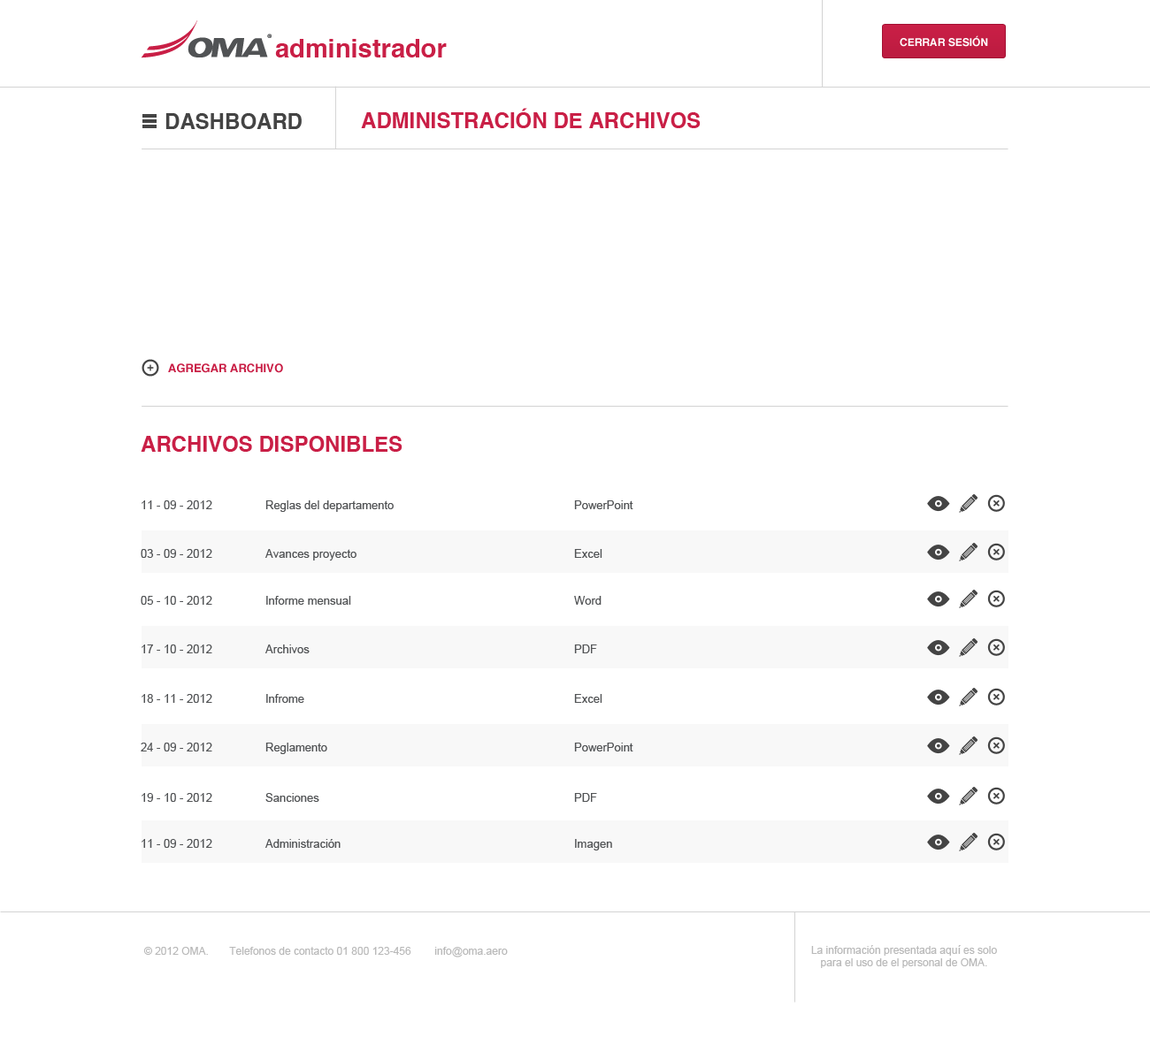
<style>
.page{position:relative;width:1150px;height:1037px;background:#ffffff}
.page>*{position:absolute;margin:0}
.t1{font:25.7px "Helvetica-Bold";color:#c91f46}
.t2{font:10.6px "Helvetica-Bold";color:#ffffff;text-transform:uppercase}
.t3{font:21.2px "Helvetica-Bold";color:#444444;text-transform:uppercase}
.t4{font:21.2px "Helvetica-Bold";color:#c91f46;text-transform:uppercase}
.t5{font:11.5px "Helvetica-Bold";color:#c91f46;text-transform:uppercase}
.t6{font:11.5px "ArialMT";color:#515355}
.t7{font:10.6px "ArialMT";color:#b9b9b9}
</style>
<div class="page">
<p class="t1" style="left:275px;top:39px;width:172px;height:18px">administrador</p>
<p class="t2" style="left:899px;top:35px;width:89px;height:12px">CERRAR sesión</p>
<p class="t3" style="left:165px;top:113px;width:137px;height:16px">DASHBOARD</p>
<p class="t4" style="left:361px;top:108px;width:339px;height:20px">Administración de archivos</p>
<p class="t5" style="left:168px;top:363px;width:115px;height:10px">agregar archivo</p>
<p class="t4" style="left:141px;top:436px;width:261px;height:16px">archivos disponibles</p>
<p class="t6" style="left:141px;top:501px;width:71px;height:8px">11 - 09 - 2012</p>
<p class="t6" style="left:265px;top:501px;width:129px;height:11px">Reglas del departamento</p>
<p class="t6" style="left:574px;top:501px;width:59px;height:8px">PowerPoint</p>
<p class="t6" style="left:141px;top:549px;width:71px;height:9px">03 - 09 - 2012</p>
<p class="t6" style="left:265px;top:549px;width:91px;height:12px">Avances proyecto</p>
<p class="t6" style="left:574px;top:549px;width:28px;height:9px">Excel</p>
<p class="t6" style="left:141px;top:596px;width:71px;height:9px">05 - 10 - 2012</p>
<p class="t6" style="left:266px;top:596px;width:85px;height:9px">Informe mensual</p>
<p class="t6" style="left:574px;top:596px;width:27px;height:9px">Word</p>
<p class="t6" style="left:141px;top:645px;width:71px;height:8px">17 - 10 - 2012</p>
<p class="t6" style="left:265px;top:645px;width:45px;height:8px">Archivos</p>
<p class="t6" style="left:574px;top:645px;width:23px;height:8px">PDF</p>
<p class="t6" style="left:141px;top:694px;width:71px;height:9px">18 - 11 - 2012</p>
<p class="t6" style="left:266px;top:694px;width:38px;height:9px">Infrome</p>
<p class="t6" style="left:574px;top:694px;width:28px;height:9px">Excel</p>
<p class="t6" style="left:141px;top:743px;width:71px;height:9px">24 - 09 - 2012</p>
<p class="t6" style="left:265px;top:743px;width:62px;height:11px">Reglamento</p>
<p class="t6" style="left:574px;top:743px;width:59px;height:9px">PowerPoint</p>
<p class="t6" style="left:141px;top:793px;width:71px;height:9px">19 - 10 - 2012</p>
<p class="t6" style="left:265px;top:793px;width:54px;height:9px">Sanciones</p>
<p class="t6" style="left:574px;top:793px;width:23px;height:9px">PDF</p>
<p class="t6" style="left:141px;top:839px;width:71px;height:9px">11 - 09 - 2012</p>
<p class="t6" style="left:265px;top:839px;width:75px;height:9px">Administración</p>
<p class="t6" style="left:575px;top:839px;width:37px;height:12px">Imagen</p>
<p class="t7" style="left:143px;top:947px;width:365px;height:11px">© 2012 OMA.       Telefonos de contacto 01 800 123-456        info@oma.aero</p>
<p class="t7" style="left:811px;top:945px;width:186px;height:23px;text-align:center">La información presentada aquí es solo<br>para el uso de el personal de OMA.</p>
</div>
